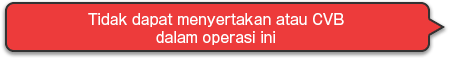
<style>
.page{position:relative;width:450px;height:58px;background:#ed3b3b}
.page>*{position:absolute;margin:0}
.t1{font:14px/18px "GothicMB101Pro-Regular";color:#ffffff}
</style>
<div class="page">
<p class="t1" style="left:88px;top:13px;width:256px;height:32px;text-align:center">Tidak dapat menyertakan atau CVB<br>dalam operasi ini</p>
</div>
